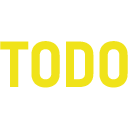
<style>
.page{position:relative;width:128px;height:128px;background:#ffffff}
.page>*{position:absolute;margin:0}
.t1{font:64px "Bahnschrift-BoldSemiCondensed";color:#f0e31a}
</style>
<div class="page">
<p class="t1" style="left:0px;top:41px;width:128px;height:47px">TODO</p>
</div>
